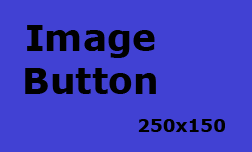
<style>
.page{position:relative;width:252px;height:152px;background:#4141d3}
.page>*{position:absolute;margin:0}
.t1{font:36px "Verdana-Bold";color:#000000}
.t2{font:18px "Verdana-Bold";color:#000000}
</style>
<div class="page">
<p class="t1" style="left:25px;top:25px;width:131px;height:69px;text-align:center">Image<br>Button</p>
<p class="t2" style="left:138px;top:119px;width:87px;height:13px">250x150</p>
</div>
